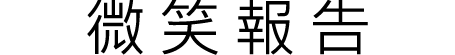
<style>
.page{position:relative;width:455px;height:55px;background:#ffffff}
.page>*{position:absolute;margin:0}
.t1{font:62.5px "MicrosoftJhengHeiRegular";letter-spacing:0.2em;color:#000000}
</style>
<div class="page">
<p class="t1" style="left:87px;top:0px;width:281px;height:55px">微笑報告</p>
</div>
